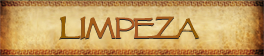
<style>
.page{position:relative;width:264px;height:56px}
.page>*{position:absolute;margin:0}
.t1{font:30px "VTCGoblinHandSC";letter-spacing:-0.08em;color:#a35a19;text-transform:uppercase;scale:1.05 1}
</style>
<div class="page">
<p class="t1" style="left:59px;top:16px;width:141px;height:23px">Limpeza</p>
</div>
